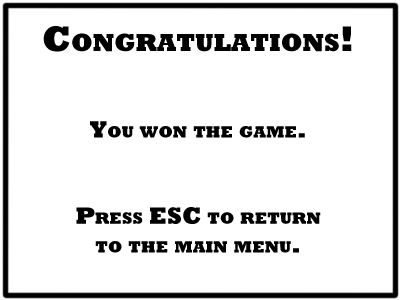
<style>
.page{position:relative;width:400px;height:300px;background:#ffffff}
.page>*{position:absolute;margin:0}
.t1{font:24px "Rockwell-ExtraBold";color:#000000;font-variant:small-caps}
.t2{font:36px "Rockwell-ExtraBold";color:#000000;font-variant:small-caps}
</style>
<div class="page">
<p class="t1" style="left:43px;top:26px;width:309px;height:227px;text-align:center"><span class="t2">Congratulations!<br></span><br><br>You won the game.<br><br><br>Press ESC to return<br>to the main menu.</p>
</div>
